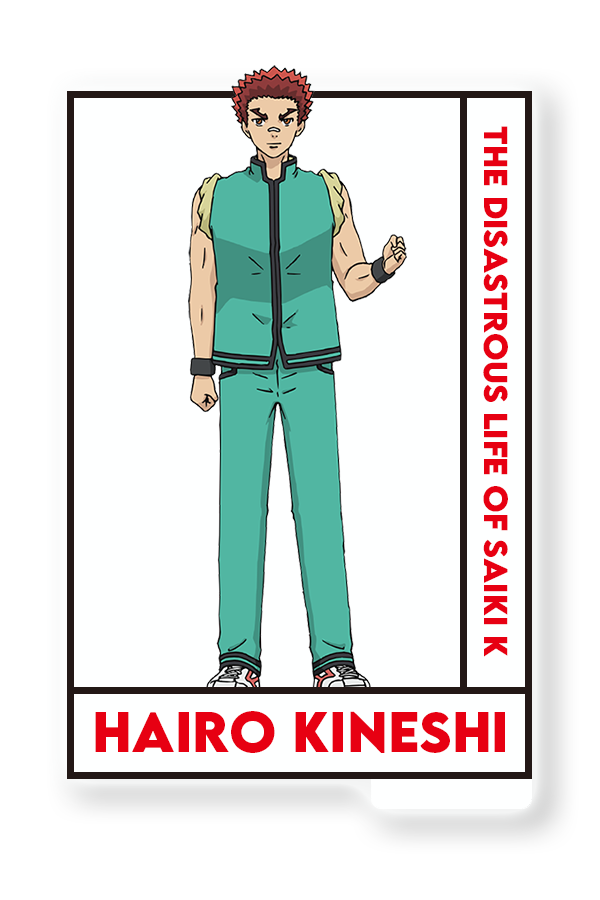
<style>
.page{position:relative;width:600px;height:900px;background:#feffff}
.page>*{position:absolute;margin:0}
.t1{font:29.6px "LEMONMILK-Bold";color:#e70012}
.t2{font:50.5px "LEMONMILK-Bold";color:#e70012}
</style>
<div class="page">
<p class="t1" style="left:483px;top:126px;width:25px;height:531px;rotate:90deg">THE disastrous Life of saiki K</p>
<p class="t2" style="left:95px;top:711px;width:410px;height:42px">Hairo Kineshi</p>
</div>
